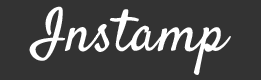
<style>
.page{position:relative;width:261px;height:80px;background:#333333}
.page>*{position:absolute;margin:0}
.t1{font:59px "Satisfy";color:#ffffff}
</style>
<div class="page">
<p class="t1" style="left:29px;top:6px;width:202px;height:69px">Instamp</p>
</div>
